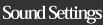
<style>
.page{position:relative;width:103px;height:25px;background:#333333}
.page>*{position:absolute;margin:0}
.t1{font:18px "HeiseiMinStd-W7";letter-spacing:-0.08em;color:#ffffff}
</style>
<div class="page">
<p class="t1" style="left:2px;top:5px;width:100px;height:19px">Sound Settings</p>
</div>
